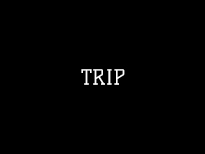
<style>
.page{position:relative;width:205px;height:154px;background:#000000}
.page>*{position:absolute;margin:0}
.t1{font:20.8px "KellySlab-Regular";color:#ffffff}
</style>
<div class="page">
<p class="t1" style="left:81px;top:69px;width:44px;height:16px">TRIP</p>
</div>
